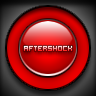
<style>
.page{position:relative;width:96px;height:96px}
.page>*{position:absolute;margin:0}
.t1{font:8px "hooge05_55Cyr2"}
</style>
<div class="page">
<p class="t1" style="left:23px;top:45px;width:50px;height:7px">after5hock</p>
</div>
